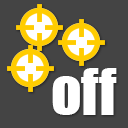
<style>
.page{position:relative;width:128px;height:128px;background:#444444}
.page>*{position:absolute;margin:0}
.t1{font:60px "Impact";color:#ffffff}
</style>
<div class="page">
<p class="t1" style="left:52px;top:68px;width:65px;height:47px">off</p>
</div>
